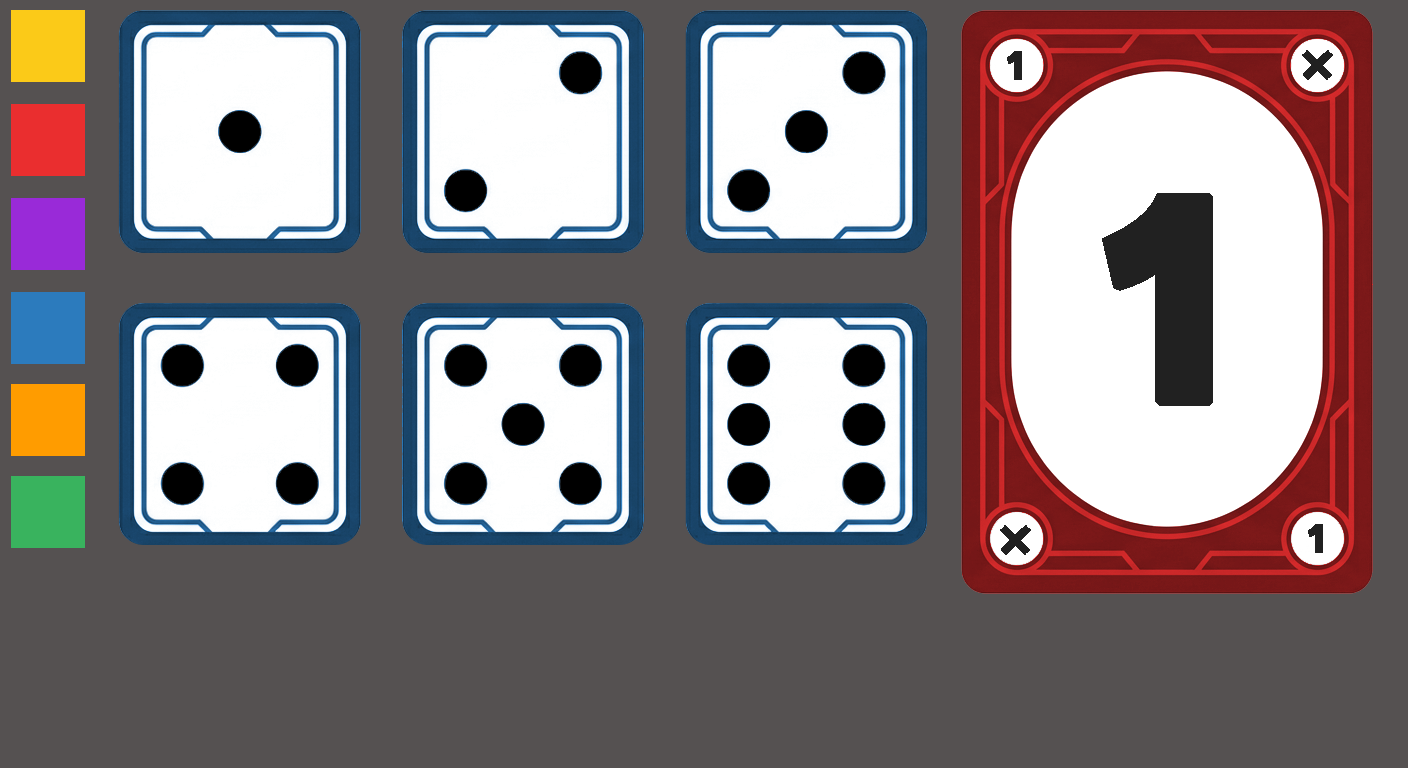
<style>
.page{position:relative;width:1408px;height:768px;background:#555151}
.page>*{position:absolute;margin:0}
.t1{font:41.4px "AXIS-ExtraBold";color:#212121;text-transform:uppercase;font-weight:bold}
.t2{font:41px "AXIS-ExtraBold";color:#212121;text-transform:uppercase;font-weight:bold}
.t3{font:300px "AXIS-ExtraBold";color:#212121;text-transform:uppercase;font-weight:bold}
</style>
<div class="page">
<p class="t1" style="left:1007px;top:51px;width:15px;height:29px">1</p>
<p class="t2" style="left:1302px;top:50px;width:31px;height:30px">x</p>
<p class="t3" style="left:1102px;top:193px;width:111px;height:213px">1</p>
<p class="t2" style="left:1000px;top:525px;width:31px;height:30px">x</p>
<p class="t1" style="left:1308px;top:524px;width:15px;height:29px">1</p>
</div>
